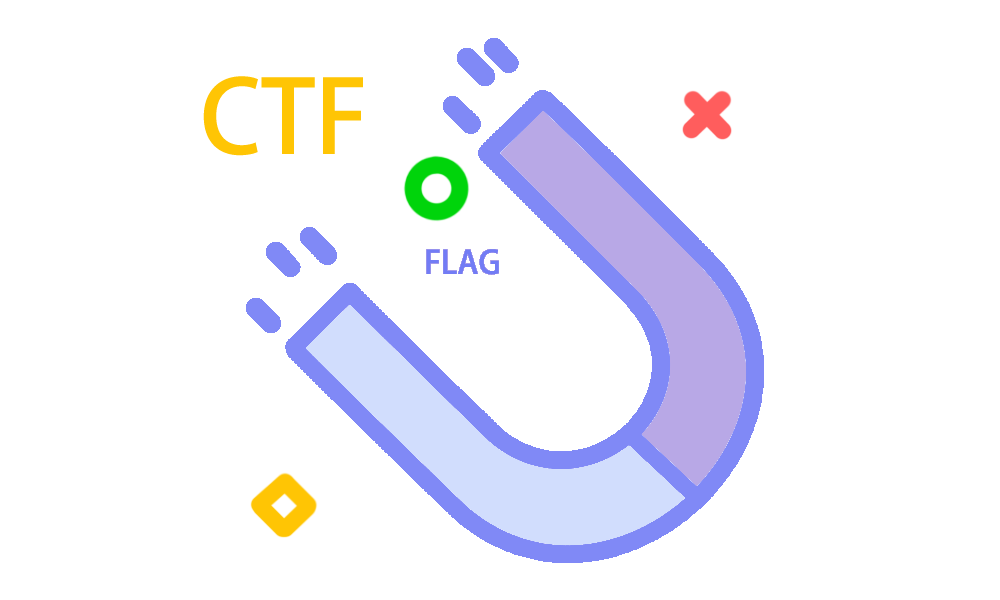
<style>
.page{position:relative;width:1000px;height:600px;background:#ffffff}
.page>*{position:absolute;margin:0}
.t1{font:100px "AdobeHeitiStd-Regular";color:#ffc504}
.t2{font:32px "AdobeHeitiStd-Regular";color:#727cf5}
</style>
<div class="page">
<p class="t1" style="left:203px;top:76px;width:160px;height:80px">CTF</p>
<p class="t2" style="left:426px;top:249px;width:73px;height:26px">FLAG</p>
</div>
